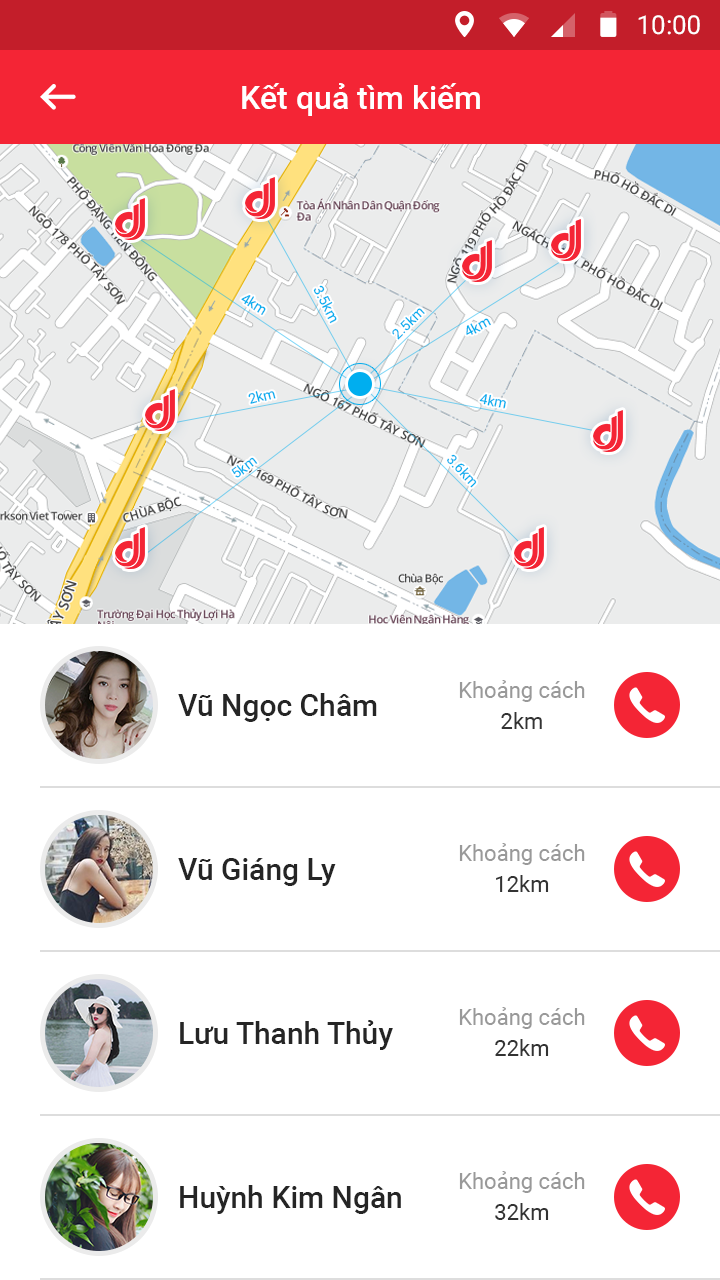
<style>
.page{position:relative;width:720px;height:1280px;background:#ffffff}
.page>*{position:absolute;margin:0}
.t1{font:26px "Roboto-Regular";color:#ffffff}
.t2{font:32px "Roboto-Medium";color:#ffffff}
.t3{font:14px "Roboto-Regular";color:#00aeef}
.t4{font:22px/31px "Roboto-Regular";color:#999999}
.t5{font:22px/31px "Roboto-Regular";color:#333333}
.t6{font:30px "Roboto-Medium";color:#252525}
</style>
<div class="page">
<p class="t1" style="left:638px;top:15px;width:62px;height:20px">10:00</p>
<p class="t2" style="left:242px;top:83px;width:238px;height:33px">Kết quả tìm kiếm</p>
<p class="t3" style="left:313px;top:285px;width:24px;height:39px;rotate:62deg">3.5km</p>
<p class="t3" style="left:241px;top:295px;width:25px;height:20px;rotate:32deg">4km</p>
<p class="t3" style="left:392px;top:308px;width:33px;height:32px;rotate:-44deg">2.5km</p>
<p class="t3" style="left:466px;top:318px;width:25px;height:17px;rotate:-28deg">4km</p>
<p class="t3" style="left:248px;top:391px;width:28px;height:13px;rotate:-15deg">2km</p>
<p class="t3" style="left:479px;top:394px;width:27px;height:15px;rotate:12deg">4km</p>
<p class="t3" style="left:231px;top:457px;width:27px;height:21px;rotate:-38deg">5km</p>
<p class="t3" style="left:447px;top:454px;width:30px;height:34px;rotate:47deg">3.6km</p>
<p class="t4" style="left:459px;top:680px;width:126px;height:49px;text-align:center">Khoảng cách<br><span class="t5">2km</span></p>
<p class="t6" style="left:178px;top:693px;width:199px;height:29px">Vũ Ngọc Châm</p>
<p class="t4" style="left:459px;top:843px;width:126px;height:49px;text-align:center">Khoảng cách<br><span class="t5">12km</span></p>
<p class="t6" style="left:178px;top:858px;width:158px;height:28px">Vũ Giáng Ly</p>
<p class="t4" style="left:459px;top:1007px;width:126px;height:49px;text-align:center">Khoảng cách<br><span class="t5">22km</span></p>
<p class="t6" style="left:180px;top:1020px;width:213px;height:30px">Lưu Thanh Thủy</p>
<p class="t4" style="left:459px;top:1171px;width:126px;height:49px;text-align:center">Khoảng cách<br><span class="t5">32km</span></p>
<p class="t6" style="left:180px;top:1185px;width:221px;height:29px">Huỳnh Kim Ngân</p>
</div>
